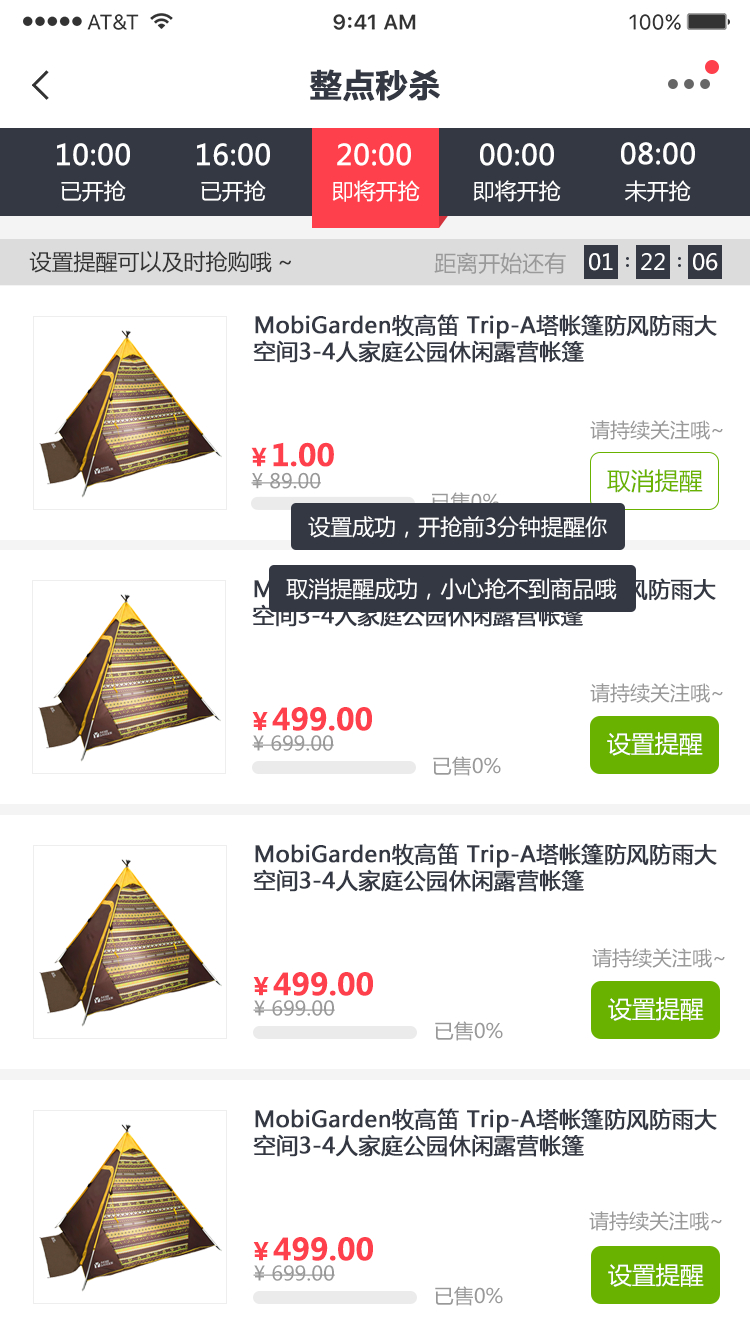
<style>
.page{position:relative;width:750px;height:1334px;background:#ffffff}
.page>*{position:absolute;margin:0}
.t1{font:32px "MicrosoftYaHei-Bold";color:#343843;font-weight:bold}
.t2{font:28px "MicrosoftYaHei";color:#ffffff;font-weight:bold}
.t3{font:22px "MicrosoftYaHei";color:#ffffff}
.t4{font:22px "MicrosoftYaHei";color:#333333}
.t5{font:22px "MicrosoftYaHei";color:#999999}
.t6{font:22px "MicrosoftYaHei";color:#343843;font-weight:bold}
.t7{font:20px "MicrosoftYaHei";color:#999999}
.t8{font:30px "MicrosoftYaHei-Bold";color:#fe404c}
.t9{font:24px "MicrosoftYaHei-Bold";color:#fe404c}
.t10{font:24px "MicrosoftYaHei";color:#69b200}
.t11{font:24px "MicrosoftYaHei";color:#ffffff}
</style>
<div class="page">
<p class="t1" style="left:309px;top:69px;width:131px;height:33px">整点秒杀</p>
<p class="t2" style="left:57px;top:143px;width:73px;height:23px">10:00</p>
<p class="t2" style="left:197px;top:143px;width:73px;height:23px">16:00</p>
<p class="t2" style="left:337px;top:143px;width:74px;height:23px">20:00</p>
<p class="t2" style="left:480px;top:143px;width:74px;height:23px">00:00</p>
<p class="t2" style="left:621px;top:142px;width:74px;height:23px">08:00</p>
<p class="t3" style="left:61px;top:180px;width:65px;height:22px">已开抢</p>
<p class="t3" style="left:201px;top:180px;width:65px;height:22px">已开抢</p>
<p class="t3" style="left:332px;top:180px;width:88px;height:22px">即将开抢</p>
<p class="t3" style="left:473px;top:180px;width:88px;height:22px">即将开抢</p>
<p class="t3" style="left:625px;top:180px;width:66px;height:22px">未开抢</p>
<p class="t4" style="left:29px;top:251px;width:262px;height:22px">设置提醒可以及时抢购哦~</p>
<p class="t5" style="left:434px;top:252px;width:132px;height:22px">距离开始还有</p>
<p class="t3" style="left:589px;top:253px;width:24px;height:18px">01</p>
<p class="t3" style="left:641px;top:253px;width:24px;height:17px">22</p>
<p class="t3" style="left:693px;top:253px;width:25px;height:18px">06</p>
<p class="t6" style="left:253px;top:314px;width:464px;height:49px">MobiGarden牧高笛 Trip-A塔帐篷防风防雨大空间3-4人家庭公园休闲露营帐篷</p>
<p class="t7" style="left:590px;top:420px;width:133px;height:20px">请持续关注哦~</p>
<p class="t8" style="left:251px;top:442px;width:83px;height:25px"><span class="t9">￥</span>1.00</p>
<p class="t7" style="left:251px;top:472px;width:70px;height:17px">¥ 89.00</p>
<p class="t10" style="left:607px;top:469px;width:96px;height:24px">取消提醒</p>
<p class="t3" style="left:308px;top:516px;width:299px;height:22px">设置成功，开抢前3分钟提醒你</p>
<p class="t6" style="left:252px;top:578px;width:464px;height:49px">MobiGarden牧高笛 Trip-A塔帐篷防风防雨大空间3-4人家庭公园休闲露营帐篷</p>
<p class="t3" style="left:286px;top:578px;width:331px;height:22px">取消提醒成功，小心抢不到商品哦</p>
<p class="t7" style="left:590px;top:683px;width:133px;height:20px">请持续关注哦~</p>
<p class="t8" style="left:252px;top:707px;width:120px;height:24px"><span class="t9">￥</span>499.00</p>
<p class="t7" style="left:252px;top:735px;width:82px;height:16px">¥ 699.00</p>
<p class="t11" style="left:607px;top:732px;width:96px;height:24px">设置提醒</p>
<p class="t7" style="left:433px;top:756px;width:68px;height:20px">已售0%</p>
<p class="t6" style="left:253px;top:843px;width:464px;height:49px">MobiGarden牧高笛 Trip-A塔帐篷防风防雨大空间3-4人家庭公园休闲露营帐篷</p>
<p class="t7" style="left:592px;top:948px;width:133px;height:20px">请持续关注哦~</p>
<p class="t8" style="left:253px;top:972px;width:120px;height:24px"><span class="t9">￥</span>499.00</p>
<p class="t7" style="left:253px;top:1000px;width:82px;height:16px">¥ 699.00</p>
<p class="t11" style="left:608px;top:997px;width:96px;height:24px">设置提醒</p>
<p class="t7" style="left:435px;top:1021px;width:68px;height:20px">已售0%</p>
<p class="t6" style="left:253px;top:1108px;width:464px;height:49px">MobiGarden牧高笛 Trip-A塔帐篷防风防雨大空间3-4人家庭公园休闲露营帐篷</p>
<p class="t7" style="left:589px;top:1211px;width:133px;height:20px">请持续关注哦~</p>
<p class="t8" style="left:253px;top:1237px;width:120px;height:24px"><span class="t9">￥</span>499.00</p>
<p class="t7" style="left:253px;top:1265px;width:82px;height:16px">¥ 699.00</p>
<p class="t11" style="left:608px;top:1263px;width:96px;height:24px">设置提醒</p>
<p class="t7" style="left:435px;top:1286px;width:68px;height:20px">已售0%</p>
</div>
